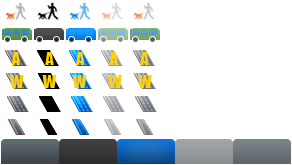
<style>
.page{position:relative;width:292px;height:165px;background:#ffffff}
.page>*{position:absolute;margin:0}
.t1{font:16px "Impact";color:#ffd200}
</style>
<div class="page">
<p class="t1" style="left:12px;top:52px;width:137px;height:13px">A         A        A         A        A</p>
<p class="t1" style="left:10px;top:75px;width:142px;height:13px">W       W      W        W      W</p>
</div>
